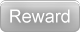
<style>
.page{position:relative;width:80px;height:32px}
.page>*{position:absolute;margin:0}
.t1{font:18px "ArialMT";color:#ffffff}
</style>
<div class="page">
<p class="t1" style="left:9px;top:7px;width:62px;height:21px">Reward</p>
</div>
